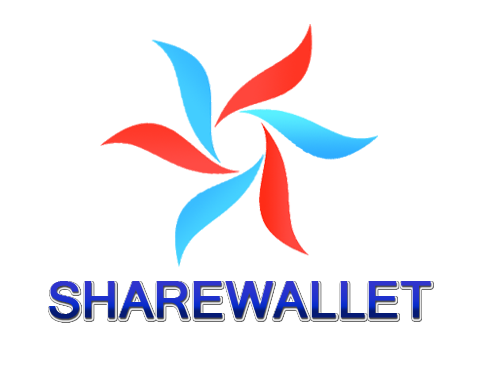
<style>
.page{position:relative;width:488px;height:366px;background:#ffffff}
.page>*{position:absolute;margin:0}
.t1{font:48px "Mangal";font-weight:bold}
</style>
<div class="page">
<p class="t1" style="left:49px;top:281px;width:382px;height:38px">SHAREWALLET</p>
</div>
